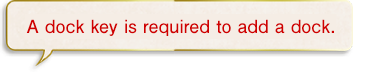
<style>
.page{position:relative;width:381px;height:72px;background:#ffffff}
.page>*{position:absolute;margin:0}
.t1{font:18px "FutoGoB101Pr5-Bold";color:#d00000}
</style>
<div class="page">
<p class="t1" style="left:26px;top:19px;width:308px;height:17px">A dock key is required to add a dock.</p>
</div>
